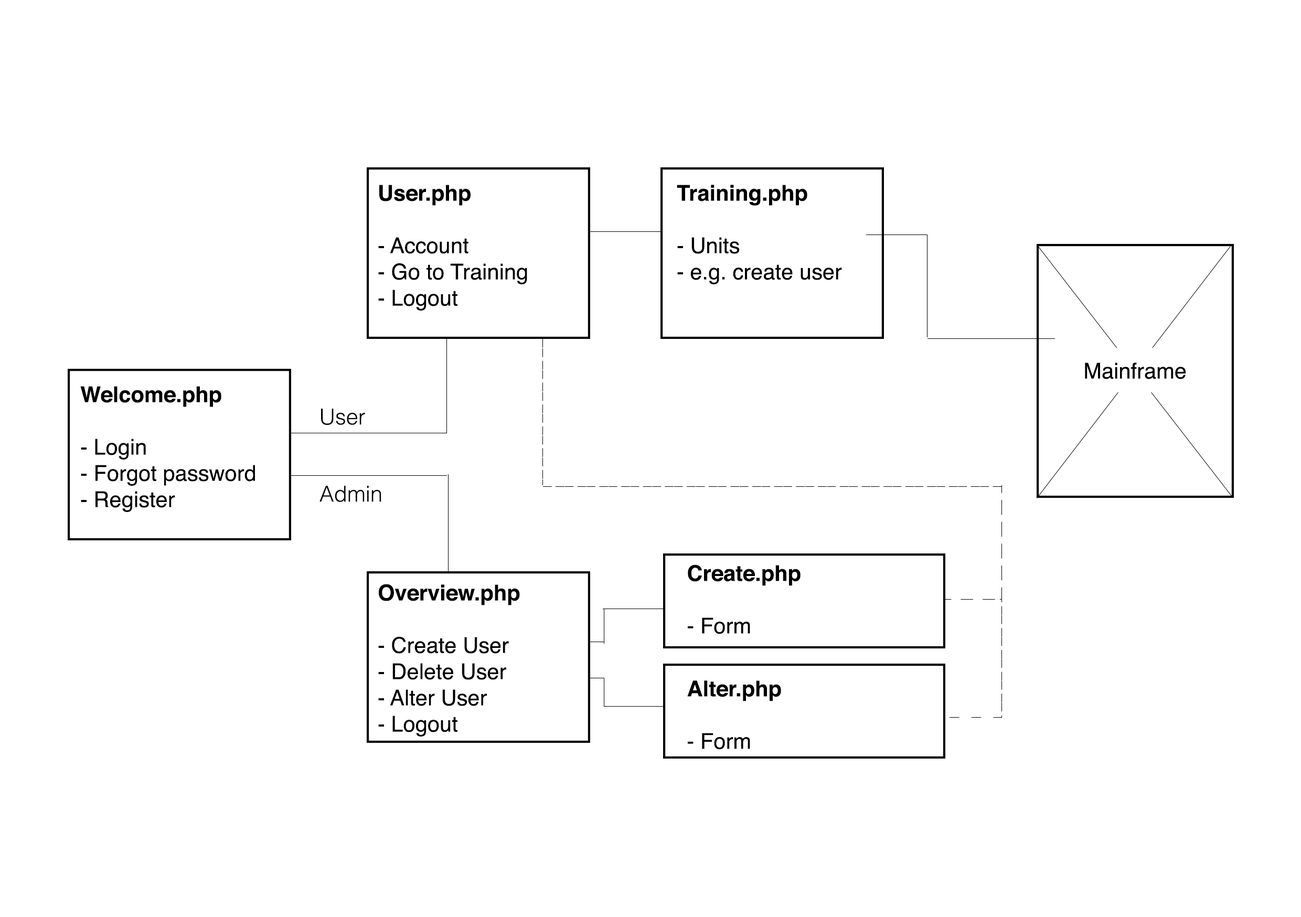
<style>
.page{position:relative;width:1301px;height:917px;background:#ffffff}
.page>*{position:absolute;margin:0}
.t1{font:21.9px "Helvetica";color:#000000}
.t2{font:21.9px "Helvetica-Bold";color:#000000}
.t3{font:21.9px "Helvetica-Light";color:#000000}
</style>
<div class="page">
<p class="t1" style="left:378px;top:185px;width:149px;height:125px"><span class="t2">User.php<br><br></span>- Account<br>- Go to Training<br>- Logout</p>
<p class="t1" style="left:677px;top:185px;width:165px;height:99px"><span class="t2">Training.php<br><br></span>- Units<br>- e.g. create user</p>
<p class="t1" style="left:1085px;top:362px;width:101px;height:17px">Mainframe</p>
<p class="t1" style="left:80px;top:386px;width:175px;height:126px"><span class="t2">Welcome.php<br></span><br>- Login<br>- Forgot password<br>- Register</p>
<p class="t3" style="left:321px;top:409px;width:44px;height:16px">User</p>
<p class="t3" style="left:319px;top:486px;width:62px;height:16px">Admin</p>
<p class="t2" style="left:688px;top:564px;width:112px;height:70px">Create.php<br><br><span class="t1">- Form</span></p>
<p class="t1" style="left:378px;top:584px;width:142px;height:152px"><span class="t2">Overview.php<br></span><br>- Create User<br>- Delete User<br>- Alter User<br>- Logout</p>
<p class="t2" style="left:687px;top:680px;width:94px;height:69px">Alter.php<br><br><span class="t1">- Form</span></p>
</div>
